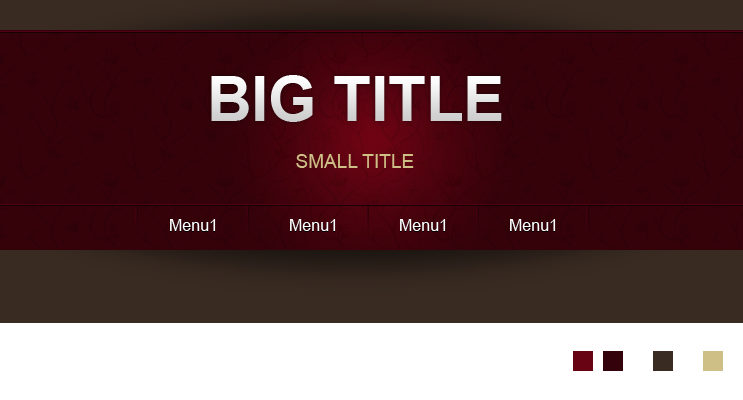
<style>
.page{position:relative;width:743px;height:400px}
.page>*{position:absolute;margin:0}
.t1{font:61.6px "Arial-BoldMT"}
.t2{font:19.1px "ArialMT";color:#cebf86}
.t3{font:16px "ArialMT"}
.t4{font:16px "ArialMT";color:#ffffff}
</style>
<div class="page">
<p class="t1" style="left:211px;top:75px;width:291px;height:47px">BIG TITLE</p>
<p class="t2" style="left:296px;top:154px;width:118px;height:14px">SMALL TITLE</p>
<p class="t3" style="left:170px;top:220px;width:46px;height:12px">Menu1</p>
<p class="t4" style="left:170px;top:219px;width:46px;height:12px">Menu1</p>
<p class="t3" style="left:290px;top:220px;width:46px;height:12px">Menu1</p>
<p class="t4" style="left:290px;top:219px;width:46px;height:12px">Menu1</p>
<p class="t3" style="left:400px;top:220px;width:46px;height:12px">Menu1</p>
<p class="t4" style="left:400px;top:219px;width:46px;height:12px">Menu1</p>
<p class="t3" style="left:510px;top:220px;width:46px;height:12px">Menu1</p>
<p class="t4" style="left:510px;top:219px;width:46px;height:12px">Menu1</p>
</div>
